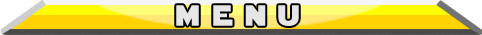
<style>
.page{position:relative;width:482px;height:35px;background:#ffd200}
.page>*{position:absolute;margin:0}
.t1{font:28.8px "StarJedi";color:#e6e6e6}
</style>
<div class="page">
<p class="t1" style="left:176px;top:5px;width:123px;height:21px">m e n u</p>
</div>
